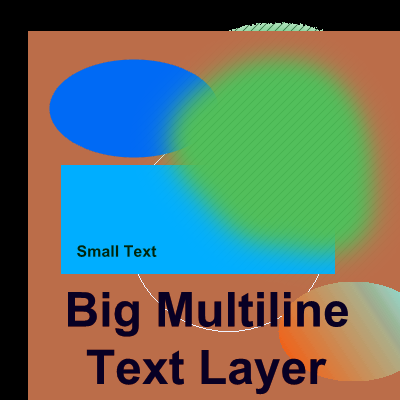
<style>
.page{position:relative;width:400px;height:400px;background:#bb6d49}
.page>*{position:absolute;margin:0}
.t1{font:16px "Arial-BoldMT"}
.t2{font:48px "Arial-BoldMT";color:#000323}
</style>
<div class="page">
<p class="t1" style="left:77px;top:245px;width:79px;height:12px">Small Text</p>
<p class="t2" style="left:69px;top:292px;width:281px;height:103px;text-align:center">Big Multiline Text Layer</p>
</div>
